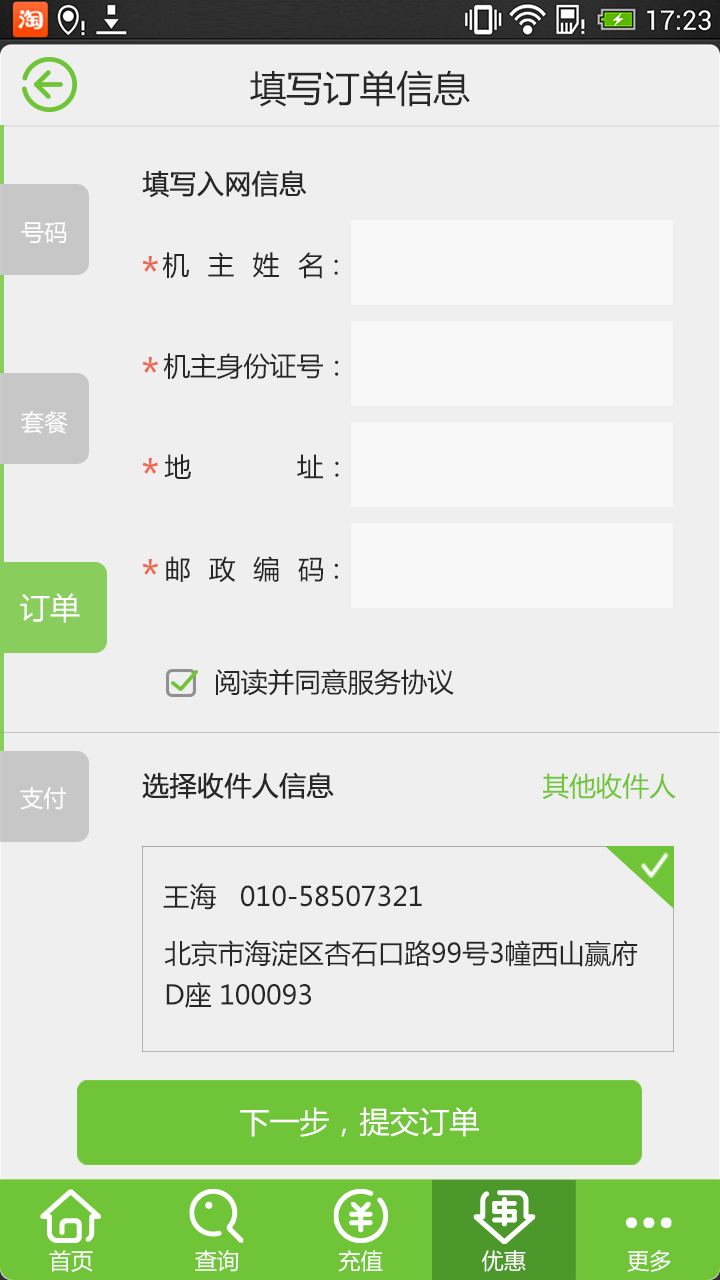
<style>
.page{position:relative;width:720px;height:1280px;background:#efefef}
.page>*{position:absolute;margin:0}
.t1{font:36.7px "MicrosoftYaHei";color:#272727}
.t2{font:26.7px "MicrosoftYaHei";color:#272727;font-weight:bold}
.t3{font:23.3px "MicrosoftYaHei";color:#ffffff}
.t4{font:41.7px "MicrosoftYaHei";color:#f06751}
.t5{font:26.7px "MicrosoftYaHei";letter-spacing:0.7em;color:#272727}
.t6{font:26.7px "MicrosoftYaHei";color:#272727}
.t7{font:26.7px "MicrosoftYaHei";letter-spacing:0.67em;color:#272727}
.t8{font:30px "MicrosoftYaHei";color:#ffffff}
.t9{font:26.7px "MicrosoftYaHei";color:#6fc537}
.t10{font:26.7px/41.7px "MicrosoftYaHei";color:#272727}
.t11{font:22.2px "MicrosoftYaHei";color:#ffffff}
</style>
<div class="page">
<p class="t1" style="left:250px;top:70px;width:220px;height:37px">填写订单信息</p>
<p class="t2" style="left:142px;top:170px;width:165px;height:28px">填写入网信息</p>
<p class="t3" style="left:21px;top:222px;width:46px;height:21px">号码</p>
<p class="t4" style="left:142px;top:256px;width:16px;height:16px">*</p>
<p class="t5" style="left:162px;top:252px;width:176px;height:27px">机主姓名：</p>
<p class="t6" style="left:163px;top:353px;width:176px;height:27px">机主身份证号：</p>
<p class="t4" style="left:142px;top:357px;width:16px;height:16px">*</p>
<p class="t3" style="left:21px;top:411px;width:47px;height:23px">套餐</p>
<p class="t4" style="left:142px;top:458px;width:16px;height:16px">*</p>
<p class="t5" style="left:164px;top:454px;width:175px;height:25px">地址：</p>
<p class="t7" style="left:166px;top:556px;width:172px;height:27px">邮政编码：</p>
<p class="t4" style="left:142px;top:559px;width:16px;height:16px">*</p>
<p class="t8" style="left:20px;top:593px;width:60px;height:30px">订单</p>
<p class="t6" style="left:216px;top:669px;width:238px;height:27px">阅读并同意服务协议</p>
<p class="t2" style="left:142px;top:772px;width:192px;height:27px">选择收件人信息</p>
<p class="t9" style="left:542px;top:773px;width:134px;height:27px">其他收件人</p>
<p class="t3" style="left:20px;top:787px;width:46px;height:23px">支付</p>
<p class="t6" style="left:163px;top:883px;width:259px;height:27px">王海   010-58507321</p>
<p class="t10" style="left:164px;top:940px;width:474px;height:68px">北京市海淀区杏石口路99号3幢西山赢府<br>D座 100093</p>
<p class="t8" style="left:240px;top:1107px;width:239px;height:30px">下一步，提交订单</p>
<p class="t11" style="left:49px;top:1250px;width:44px;height:22px">首页</p>
<p class="t11" style="left:195px;top:1250px;width:44px;height:22px">查询</p>
<p class="t11" style="left:338px;top:1250px;width:45px;height:22px">充值</p>
<p class="t11" style="left:481px;top:1250px;width:45px;height:22px">优惠</p>
<p class="t11" style="left:627px;top:1250px;width:44px;height:22px">更多</p>
</div>
